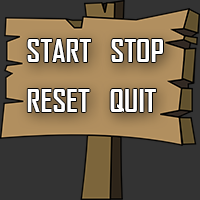
<style>
.page{position:relative;width:200px;height:200px;background:#333333}
.page>*{position:absolute;margin:0}
.t1{font:30px "AgencyFB-Bold";color:#ffffff;text-transform:uppercase}
</style>
<div class="page">
<p class="t1" style="left:27px;top:39px;width:64px;height:23px">Start</p>
<p class="t1" style="left:111px;top:39px;width:52px;height:23px">StOP</p>
<p class="t1" style="left:27px;top:89px;width:63px;height:23px">reset</p>
<p class="t1" style="left:110px;top:89px;width:46px;height:23px">Quit</p>
</div>
